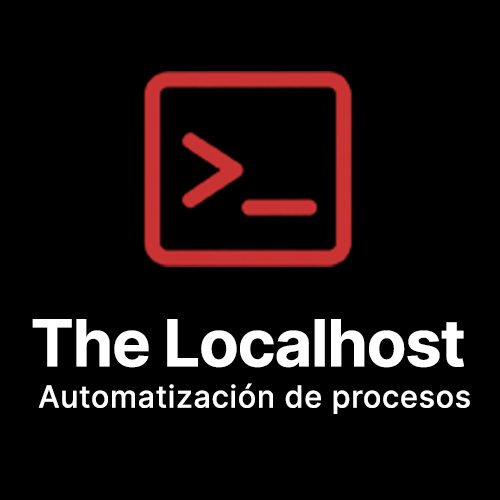
<style>
.page{position:relative;width:500px;height:500px;background:#000000}
.page>*{position:absolute;margin:0}
.t1{font:65px "Inter-Bold";letter-spacing:-0.02em;color:#ffffff}
.t2{font:30.6px "Inter-Medium";letter-spacing:0.02em;color:#ffffff}
</style>
<div class="page">
<p class="t1" style="left:32px;top:319px;width:432px;height:49px">The Localhost</p>
<p class="t2" style="left:38px;top:383px;width:432px;height:31px">Automatización de procesos</p>
</div>
